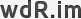
<style>
.page{position:relative;width:81px;height:19px;background:#f5f5f5}
.page>*{position:absolute;margin:0}
.t1{font:24px "Oblik-Bold";color:#424242}
</style>
<div class="page">
<p class="t1" style="left:0px;top:0px;width:81px;height:18px">wdR.im</p>
</div>
